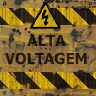
<style>
.page{position:relative;width:96px;height:96px}
.page>*{position:absolute;margin:0}
.t1{font:14.9px/18px "Tahoma-Bold";color:#23180b}
</style>
<div class="page">
<p class="t1" style="left:5px;top:35px;width:82px;height:30px;text-align:center">ALTA<br>VOLTAGEM</p>
</div>
